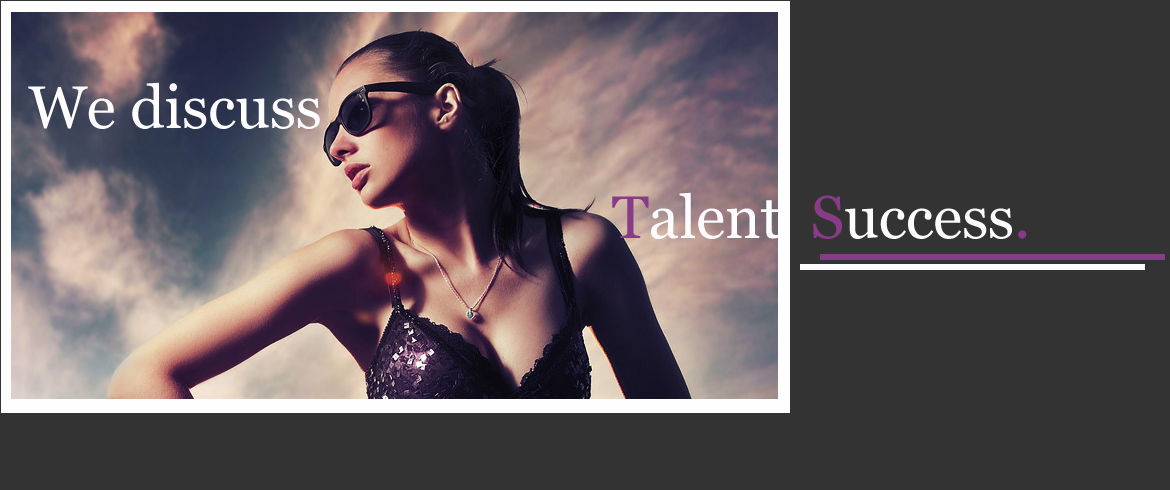
<style>
.page{position:relative;width:1170px;height:490px;background:#333333}
.page>*{position:absolute;margin:0}
.t1{font:60px "Georgia";color:#fefcfe}
.t2{font:60px "Georgia";color:#883c88}
</style>
<div class="page">
<p class="t1" style="left:28px;top:82px;width:292px;height:47px">We discuss</p>
<p class="t1" style="left:612px;top:192px;width:415px;height:47px"><span class="t2">T</span>alent  <span class="t2">S</span>uccess<span class="t2">.</span></p>
</div>
